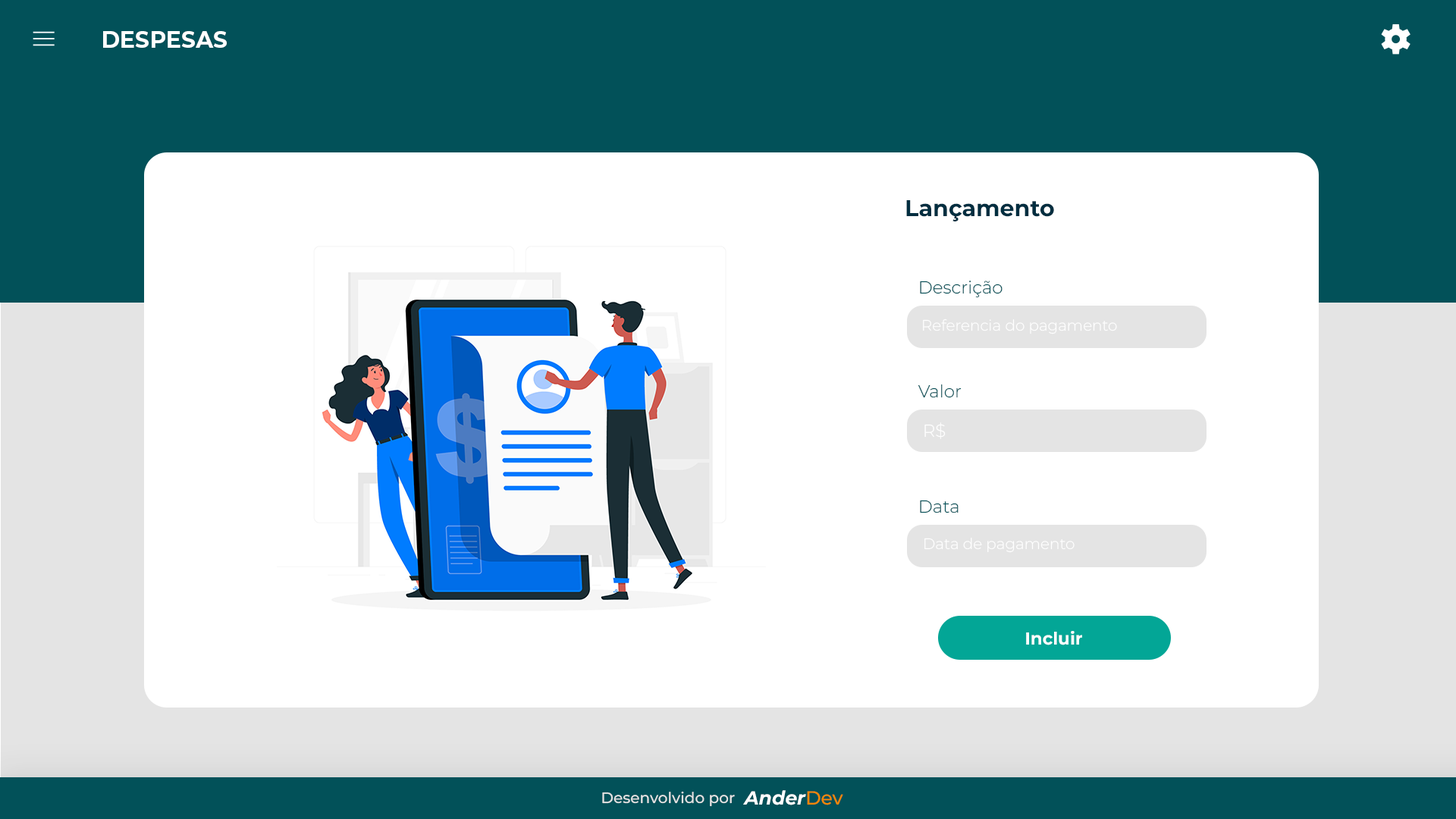
<style>
.page{position:relative;width:1456px;height:819px;background:#ffffff}
.page>*{position:absolute;margin:0}
.t1{font:22.7px "Montserrat-Bold";color:#ffffff}
.t2{font:22.7px "Montserrat-Bold";color:#012e40}
.t3{font:17.4px "Montserrat-Light";color:#025159}
.t4{font:15.2px "Montserrat-Light";color:#ffffff}
.t5{font:17.4px "Montserrat-Light";color:#ffffff}
.t6{font:17.4px "Montserrat-Bold";color:#ffffff}
.t7{font:15.2px "Montserrat-Medium";color:#e4e4e4}
.t8{font:19px "Montserrat-BoldItalic";color:#ffffff}
.t9{font:19px "Montserrat-Medium";color:#f28705}
</style>
<div class="page">
<p class="t1" style="left:103px;top:31px;width:124px;height:17px">DESPESAS</p>
<p class="t2" style="left:906px;top:200px;width:148px;height:21px">Lançamento</p>
<p class="t3" style="left:920px;top:281px;width:83px;height:17px">Descrição</p>
<p class="t4" style="left:923px;top:318px;width:194px;height:16px">Referencia do pagamento</p>
<p class="t3" style="left:918px;top:384px;width:44px;height:14px">Valor</p>
<p class="t5" style="left:924px;top:422px;width:22px;height:17px">R$</p>
<p class="t3" style="left:920px;top:500px;width:39px;height:13px">Data</p>
<p class="t4" style="left:924px;top:538px;width:151px;height:15px">Data de pagamento</p>
<p class="t6" style="left:1026px;top:631px;width:56px;height:14px">Incluir</p>
<p class="t7" style="left:602px;top:791px;width:133px;height:16px">Desenvolvido por</p>
<p class="t8" style="left:743px;top:790px;width:100px;height:15px">Ander<span class="t9">Dev</span></p>
</div>
